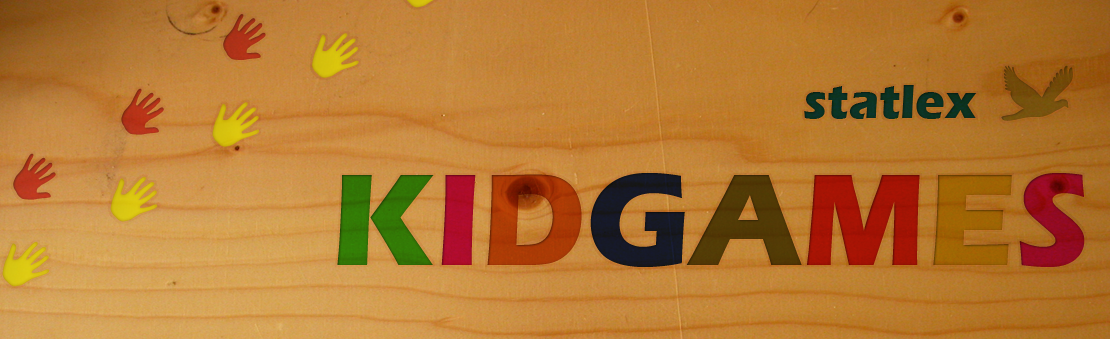
<style>
.page{position:relative;width:1110px;height:339px}
.page>*{position:absolute;margin:0}
.t1{font:49.6px "ErasITC-Bold";color:#0b3121}
.t2{font:135.4px "ErasITC-Bold"}
</style>
<div class="page">
<p class="t1" style="left:804px;top:85px;width:173px;height:34px">statlex</p>
<p class="t2" style="left:337px;top:173px;width:748px;height:94px">KIDGAMES</p>
</div>
